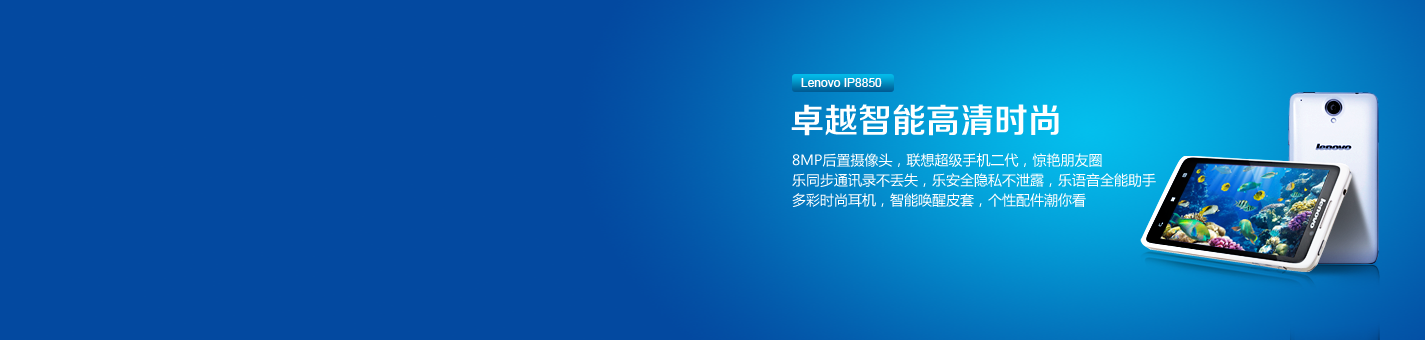
<style>
.page{position:relative;width:1425px;height:340px;background:#0349a0}
.page>*{position:absolute;margin:0}
.t1{font:12px "ArialMT";color:#ffffff}
.t2{font:34px "FZZZHONGJW--GB1-0";color:#ffffff}
.t3{font:14px/20px "MicrosoftYaHei";color:#ffffff}
</style>
<div class="page">
<p class="t1" style="left:801px;top:78px;width:81px;height:9px">Lenovo IP8850</p>
<p class="t2" style="left:791px;top:104px;width:268px;height:32px">卓越智能高清时尚</p>
<p class="t3" style="left:792px;top:153px;width:364px;height:54px">8MP后置摄像头，联想超级手机二代，惊艳朋友圈<br>乐同步通讯录不丢失，乐安全隐私不泄露，乐语音全能助手<br>多彩时尚耳机，智能唤醒皮套，个性配件潮你看</p>
</div>
